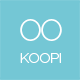
<style>
.page{position:relative;width:80px;height:80px;background:#74c7d5}
.page>*{position:absolute;margin:0}
.t1{font:30px "Raleway-Light";letter-spacing:-0.05em;color:#ffffff;font-variant:small-caps}
.t2{font:18px "Raleway-Light";letter-spacing:-0.05em;color:#ffffff;font-variant:small-caps}
</style>
<div class="page">
<p class="t1" style="left:20px;top:19px;width:42px;height:22px">OO</p>
<p class="t2" style="left:20px;top:53px;width:41px;height:10px">koopi</p>
</div>
